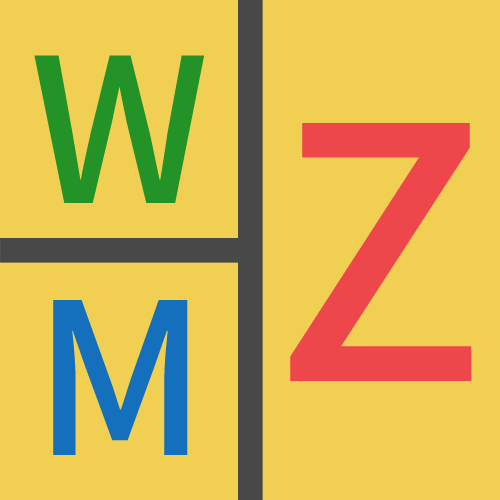
<style>
.page{position:relative;width:500px;height:500px;background:#f1cf53}
.page>*{position:absolute;margin:0}
.t1{font:200px "ChironSansHKTT-Medium";color:#239428}
.t2{font:350px "ChironSansHKTT-Medium";color:#ee474c}
.t3{font:210px "ChironSansHKTT-Medium";color:#146fbe}
</style>
<div class="page">
<p class="t1" style="left:34px;top:55px;width:170px;height:148px">W</p>
<p class="t2" style="left:290px;top:123px;width:182px;height:258px">Z</p>
<p class="t3" style="left:53px;top:300px;width:135px;height:155px">M</p>
</div>
